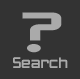
<style>
.page{position:relative;width:80px;height:79px;background:#333333}
.page>*{position:absolute;margin:0}
.t1{font:50.9px "ZeroesThree";color:#aaaaaa;scale:1.69 1}
.t2{font:14px "ZeroesThree";color:#aaaaaa}
</style>
<div class="page">
<p class="t1" style="left:22px;top:12px;width:40px;height:41px">?</p>
<p class="t2" style="left:13px;top:57px;width:55px;height:11px">Search</p>
</div>
